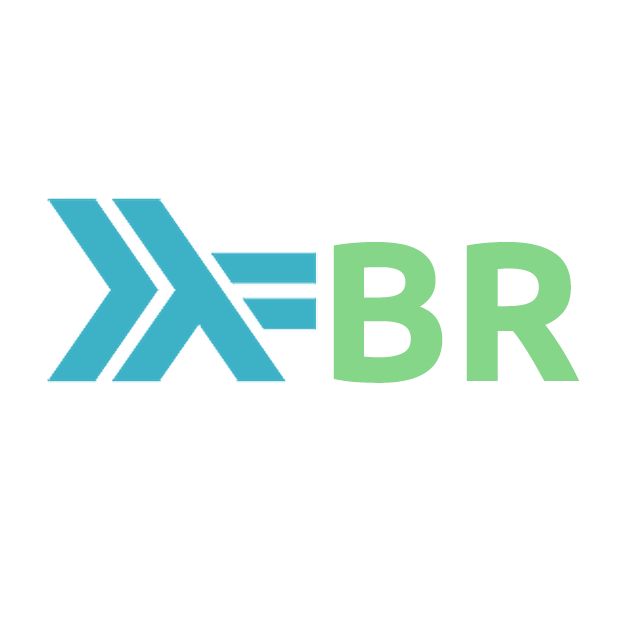
<style>
.page{position:relative;width:621px;height:621px;background:#ffffff}
.page>*{position:absolute;margin:0}
.t1{font:198.2px "Ubuntu-Bold";color:#85d689}
</style>
<div class="page">
<p class="t1" style="left:333px;top:242px;width:247px;height:141px">BR</p>
</div>
